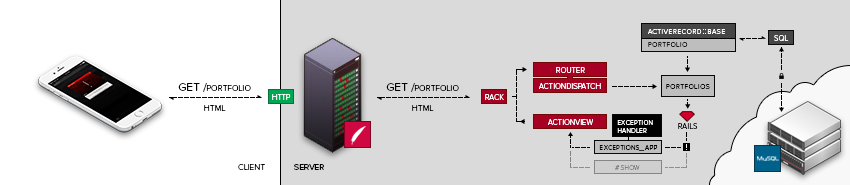
<style>
.page{position:relative;width:850px;height:185px;background:#dadada}
.page>*{position:absolute;margin:0}
.t1{font:10px "ProximaNovaS-Light";letter-spacing:0.05em;color:#ffffff;font-variant:small-caps}
.t2{font:11px "ProximaNovaS-Light";color:#ffffff;font-variant:small-caps}
.t3{font:10px "ProximaNovaS-Light";letter-spacing:0.05em;color:#181818;font-variant:small-caps}
.t4{font:12px "ProximaNovaS-Light";color:#010101;font-variant:small-caps}
.t5{font:10px "ProximaNovaS-Light";letter-spacing:0.05em;color:#000000;font-variant:small-caps}
.t6{font:9px/8px "ProximaNovaS-Light";letter-spacing:0.05em;color:#ffffff;font-variant:small-caps}
.t7{font:11px "ProximaNovaS-Light";color:#161616;font-variant:small-caps}
.t8{font:9px "ProximaNovaS-Light";letter-spacing:0.05em;color:#000000;font-variant:small-caps}
.t9{font:12px "ProximaNovaS-Regular";color:#010101;font-variant:small-caps}
.t10{font:9px "ProximaNovaS-Light";letter-spacing:0.05em;color:#838383;font-variant:small-caps}
</style>
<div class="page">
<p class="t1" style="left:648px;top:29px;width:77px;height:5px">activerecord::base</p>
<p class="t2" style="left:774px;top:35px;width:15px;height:6px">sql</p>
<p class="t3" style="left:648px;top:42px;width:40px;height:5px">portfolio</p>
<p class="t2" style="left:556px;top:67px;width:29px;height:6px">router</p>
<p class="t4" style="left:178px;top:83px;width:73px;height:9px">GET /portfolio</p>
<p class="t4" style="left:386px;top:83px;width:73px;height:9px">GET /portfolio</p>
<p class="t2" style="left:539px;top:83px;width:62px;height:6px">actiondispatch</p>
<p class="t5" style="left:666px;top:84px;width:44px;height:5px">portfolios</p>
<p class="t2" style="left:272px;top:94px;width:19px;height:6px">http</p>
<p class="t2" style="left:485px;top:94px;width:19px;height:6px">rack</p>
<p class="t4" style="left:204px;top:105px;width:22px;height:6px">html</p>
<p class="t4" style="left:412px;top:105px;width:22px;height:6px">html</p>
<p class="t2" style="left:548px;top:119px;width:45px;height:6px">actionview</p>
<p class="t6" style="left:617px;top:120px;width:36px;height:13px">exception<br>handler</p>
<p class="t7" style="left:678px;top:123px;width:20px;height:6px">rails</p>
<p class="t8" style="left:599px;top:145px;width:59px;height:6px">exceptions_app</p>
<p class="t4" style="left:238px;top:164px;width:27px;height:6px">client</p>
<p class="t9" style="left:293px;top:164px;width:31px;height:6px">server</p>
<p class="t10" style="left:615px;top:165px;width:25px;height:5px">#show</p>
</div>
